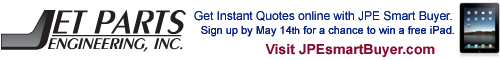
<style>
.page{position:relative;width:500px;height:60px;background:#ffffff}
.page>*{position:absolute;margin:0}
.t1{font:12px "ArialMT";color:#092383}
.t2{font:11px "ArialMT";color:#092383}
.t3{font:10px "ArialMT";color:#092383}
.t4{font:14px "Arial-BoldMT";color:#850d31}
</style>
<div class="page">
<p class="t1" style="left:194px;top:11px;width:260px;height:26px">Get Instant Quotes online with JPE Smart Buyer.<br>  <span class="t2">Sign up by May 14</span><span class="t3">th</span><span class="t2"> for a chance to win a free iPad.</span></p>
<p class="t4" style="left:265px;top:44px;width:170px;height:13px">Visit JPEsmartBuyer.com</p>
</div>
